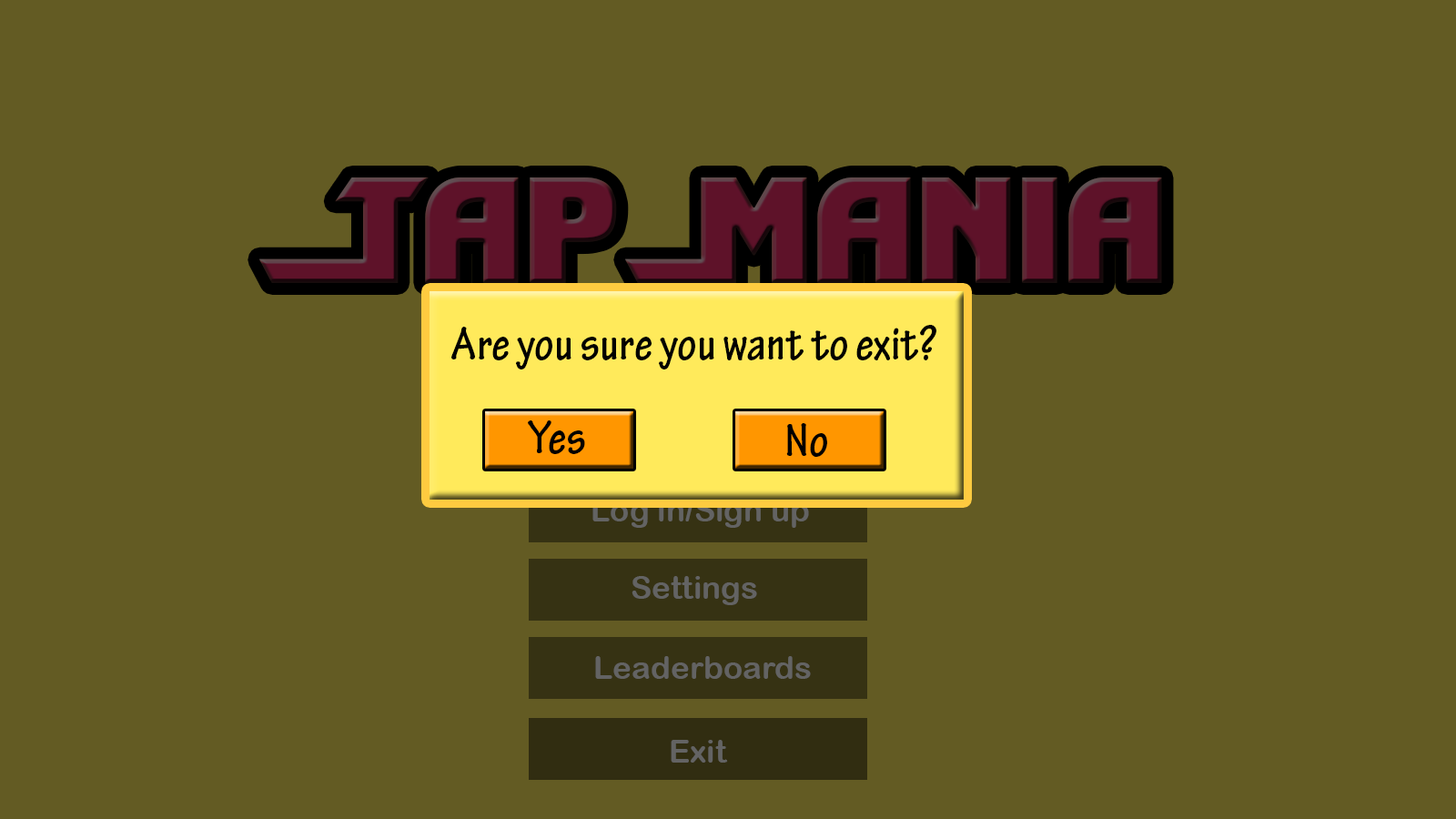
<style>
.page{position:relative;width:1456px;height:819px;background:#635b23}
.page>*{position:absolute;margin:0}
.t1{font:182px "ShiningHerald";color:#5e1229}
.t2{font:50px "TektonPro-BoldCond";color:#000000}
.t3{font:31.8px "ArialRoundedMTBold";color:#636363}
</style>
<div class="page">
<p class="t1" style="left:259px;top:177px;width:903px;height:106px">TapMania</p>
<p class="t2" style="left:451px;top:325px;width:485px;height:44px">Are you sure you want to exit?</p>
<p class="t2" style="left:528px;top:420px;width:57px;height:34px">Yes</p>
<p class="t2" style="left:786px;top:423px;width:41px;height:34px">No</p>
<p class="t3" style="left:592px;top:499px;width:217px;height:29px">Log in/Sign up</p>
<p class="t3" style="left:632px;top:576px;width:125px;height:29px">Settings</p>
<p class="t3" style="left:595px;top:656px;width:216px;height:23px">Leaderboards</p>
<p class="t3" style="left:671px;top:740px;width:57px;height:23px">Exit</p>
</div>
